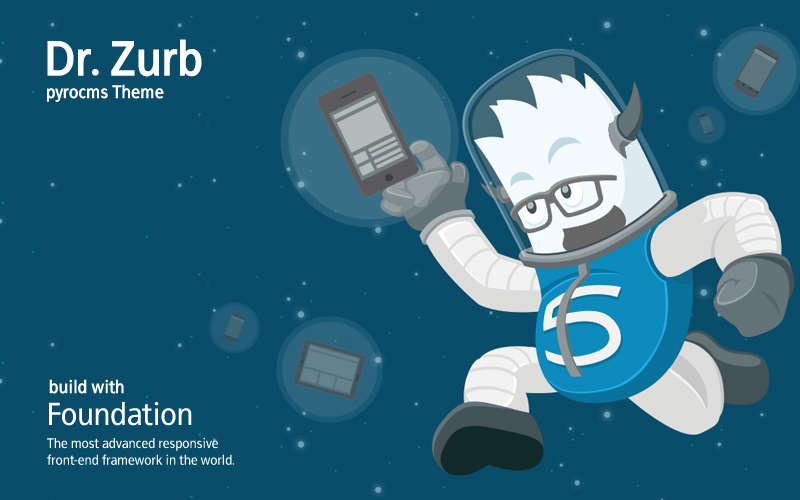
<style>
.page{position:relative;width:800px;height:500px;background:#0a4d6a}
.page>*{position:absolute;margin:0}
.t1{font:48px "FrancophilSans-Bold";color:#ffffff}
.t2{font:18px "FrancophilSans-Bold";color:#ffffff}
.t3{font:32px "FrancophilSans";color:#ffffff}
.t4{font:14px "FrancophilSans";color:#ffffff}
</style>
<div class="page">
<p class="t1" style="left:47px;top:39px;width:155px;height:38px">Dr. Zurb</p>
<p class="t2" style="left:47px;top:84px;width:117px;height:18px">pyrocms Theme</p>
<p class="t2" style="left:49px;top:379px;width:75px;height:15px">build with</p>
<p class="t3" style="left:49px;top:402px;width:143px;height:24px">Foundation</p>
<p class="t4" style="left:47px;top:438px;width:187px;height:27px">The most advanced responsive <br>front-end framework in the world.</p>
</div>
